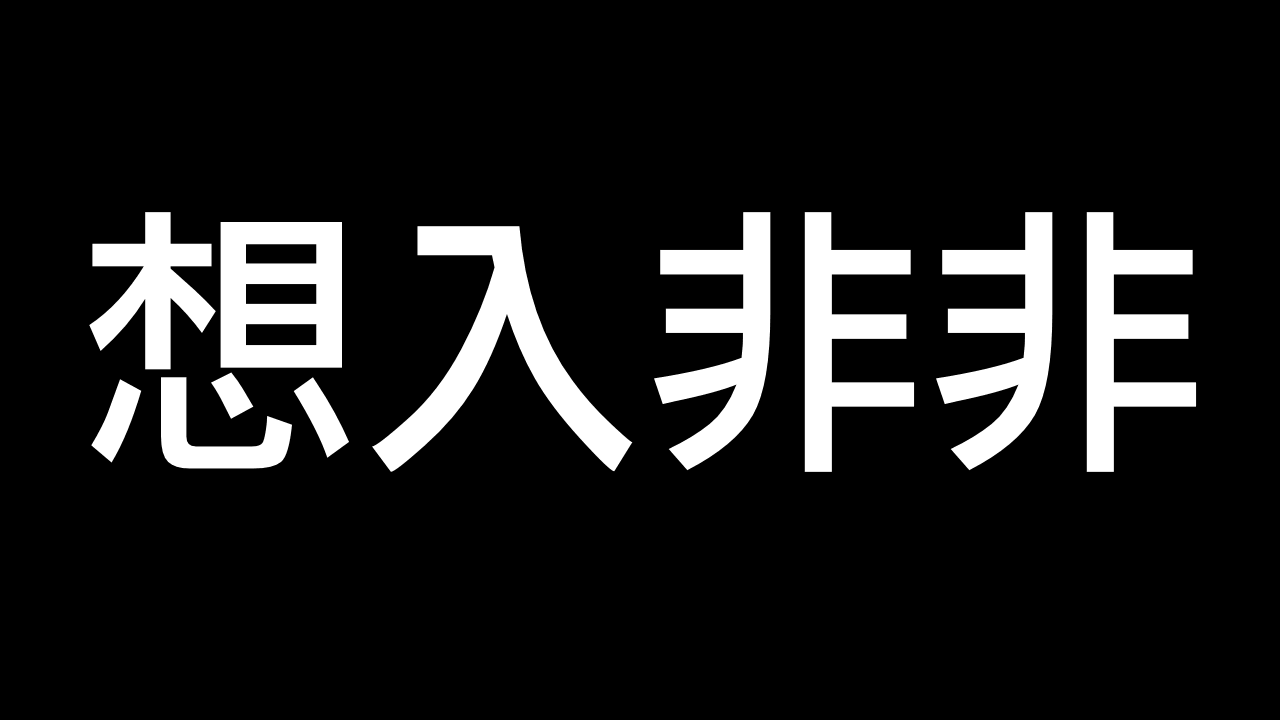
<style>
.page{position:relative;width:1280px;height:720px;background:#000000}
.page>*{position:absolute;margin:0}
.t1{font:282.3px "LiGothicMed";color:#ffffff}
</style>
<div class="page">
<p class="t1" style="left:89px;top:212px;width:1108px;height:260px">想入非非</p>
</div>
